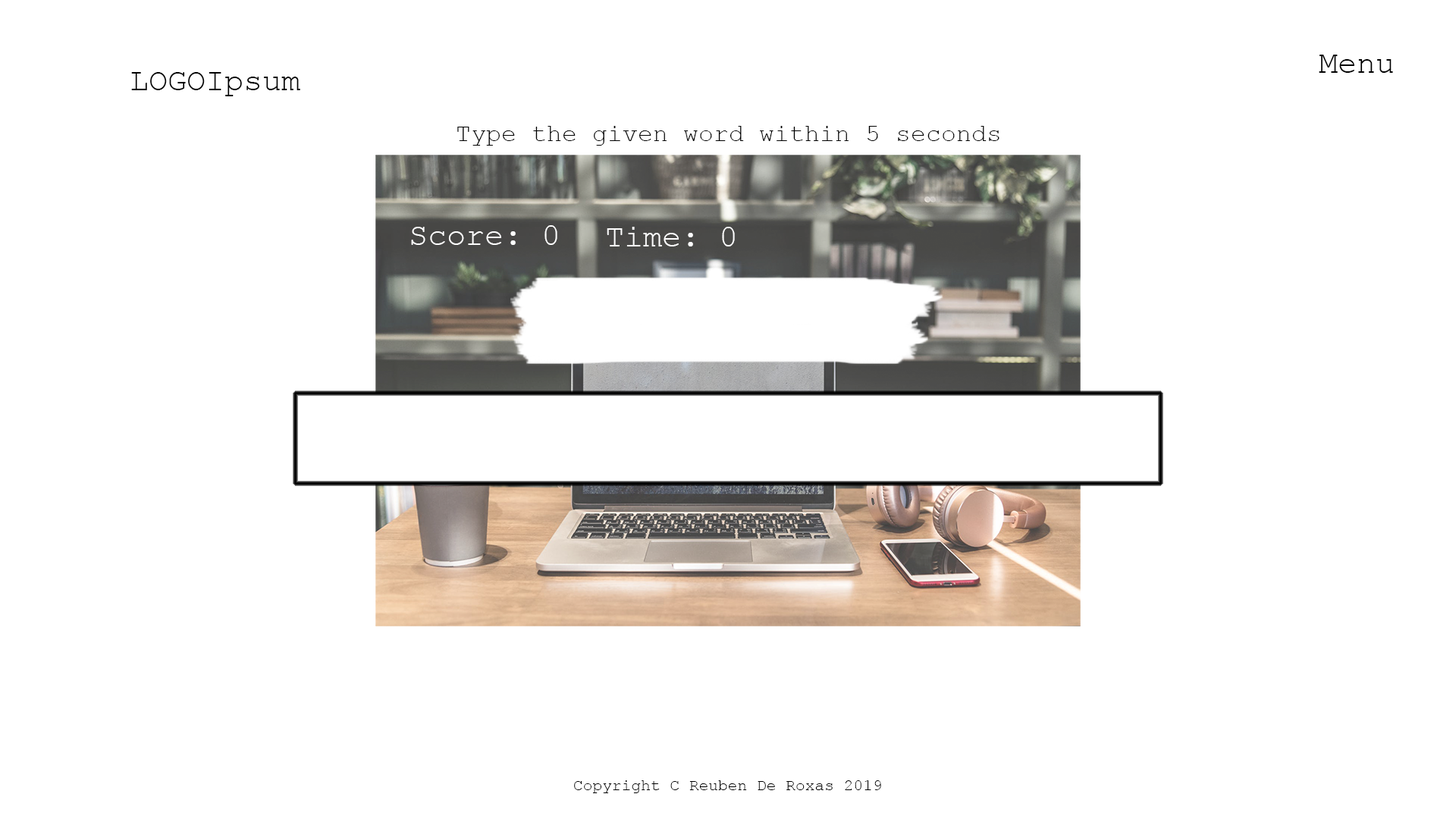
<style>
.page{position:relative;width:1456px;height:819px;background:#ffffff}
.page>*{position:absolute;margin:0}
.t1{font:31.6px "CourierNewPSMT";color:#000000}
.t2{font:25.3px "CourierNewPSMT";color:#000000}
.t3{font:31.6px "CourierNewPSMT";color:#ffffff}
.t4{font:16.1px "CourierNewPSMT";color:#000000}
</style>
<div class="page">
<p class="t1" style="left:1319px;top:55px;width:74px;height:18px">Menu</p>
<p class="t1" style="left:131px;top:72px;width:169px;height:24px">LOGOIpsum</p>
<p class="t2" style="left:457px;top:126px;width:542px;height:20px">Type the given word within 5 seconds</p>
<p class="t3" style="left:411px;top:225px;width:146px;height:20px">Score: 0</p>
<p class="t3" style="left:607px;top:227px;width:128px;height:19px">Time: 0</p>
<p class="t4" style="left:574px;top:780px;width:307px;height:13px">Copyright C Reuben De Roxas 2019</p>
</div>
